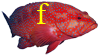
<style>
.page{position:relative;width:100px;height:56px;background:#ffffff}
.page>*{position:absolute;margin:0}
.t1{font:30px "TimesNewRomanPSMT";color:#ffff00}
</style>
<div class="page">
<p class="t1" style="left:37px;top:3px;width:12px;height:21px">f</p>
</div>
